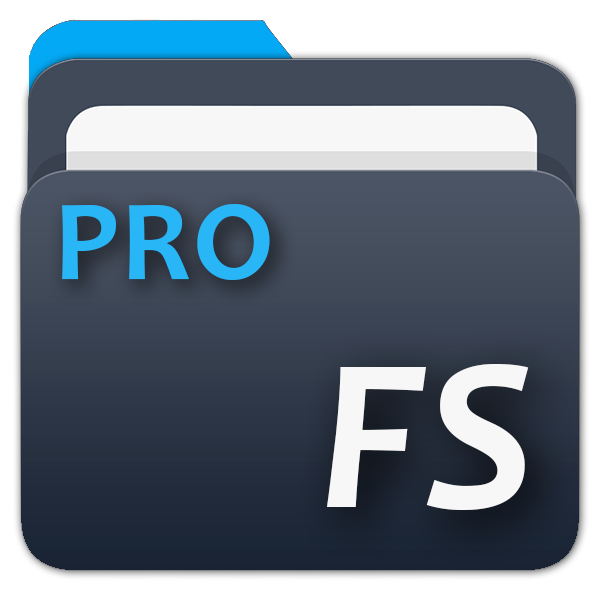
<style>
.page{position:relative;width:600px;height:600px}
.page>*{position:absolute;margin:0}
.t1{font:116px "Candara-Bold";letter-spacing:0.025em;color:#29b6f6}
.t2{font:220px "Candara-BoldItalic";color:#f7f7f8}
</style>
<div class="page">
<p class="t1" style="left:62px;top:204px;width:208px;height:76px">PRO</p>
<p class="t2" style="left:327px;top:364px;width:202px;height:146px">FS</p>
</div>
